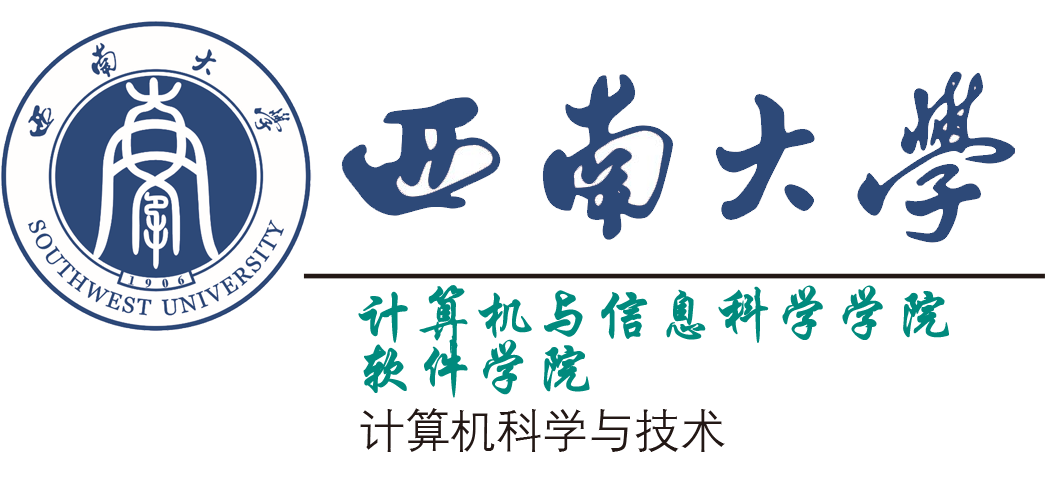
<style>
.page{position:relative;width:1046px;height:496px;background:#ffffff}
.page>*{position:absolute;margin:0}
.t1{font:58.3px/54.2px "STXingkai";color:#008a7d;font-weight:bold}
.t2{font:45.8px "DengXian";color:#231815}
</style>
<div class="page">
<p class="t1" style="left:358px;top:285px;width:591px;height:113px">计算机与信息科学学院<br>软件学院</p>
<p class="t2" style="left:360px;top:408px;width:365px;height:44px">计算机科学与技术</p>
</div>
